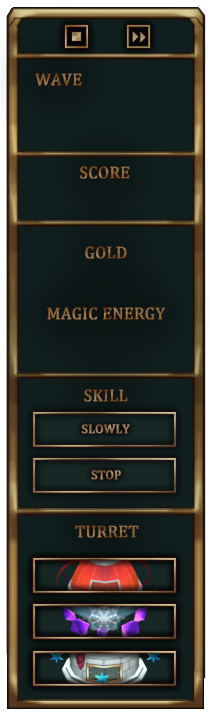
<style>
.page{position:relative;width:210px;height:720px}
.page>*{position:absolute;margin:0}
.t1{font:16.7px "CambriaMath";color:#896c40;text-transform:uppercase;font-weight:bold}
.t2{font:12.5px "CambriaMath";color:#8e7957;text-transform:uppercase;font-weight:bold}
</style>
<div class="page">
<p class="t1" style="left:35px;top:73px;width:47px;height:13px">wave</p>
<p class="t1" style="left:80px;top:166px;width:50px;height:13px">score</p>
<p class="t1" style="left:85px;top:246px;width:42px;height:13px">Gold</p>
<p class="t1" style="left:47px;top:307px;width:118px;height:13px">Magic Energy</p>
<p class="t1" style="left:84px;top:389px;width:44px;height:13px">Skill</p>
<p class="t2" style="left:82px;top:424px;width:48px;height:10px">Slowly</p>
<p class="t2" style="left:91px;top:470px;width:30px;height:10px">stop</p>
<p class="t1" style="left:75px;top:525px;width:64px;height:13px">Turret</p>
</div>
